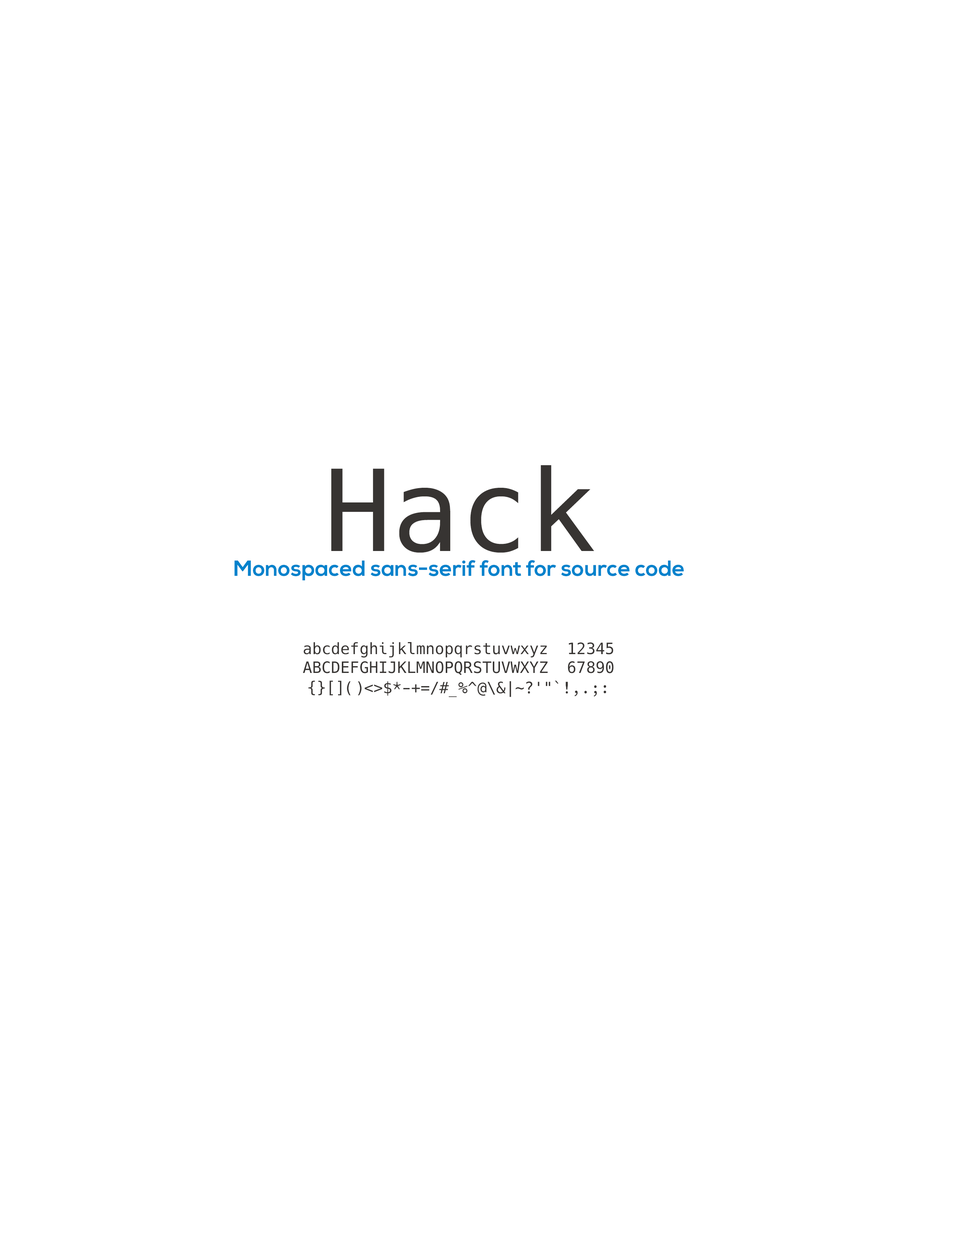
<style>
.page{position:relative;width:960px;height:1242px;background:#ffffff}
.page>*{position:absolute;margin:0}
.t1{font:112.9px "Hack-Regular";color:#373432}
.t2{font:75.3px "Arial-Black";color:#c1c1c1}
.t3{font:22px "NexaBold";color:#0082cc}
.t4{font:15.7px "Hack-Regular";color:#373432}
</style>
<div class="page">
<p class="t1" style="left:331px;top:465px;width:263px;height:88px"><span class="t2"><br></span>Hack</p>
<p class="t3" style="left:235px;top:560px;width:449px;height:20px">Monospaced sans-serif font for source code</p>
<p class="t4" style="left:303px;top:642px;width:311px;height:33px">abcdefghijklmnopqrstuvwxyz  12345<br>ABCDEFGHIJKLMNOPQRSTUVWXYZ  67890</p>
<p class="t4" style="left:308px;top:681px;width:298px;height:16px">{}[]()&lt;&gt;$*-+=/#_%^@\&amp;|~?'"`!,.;:</p>
</div>
